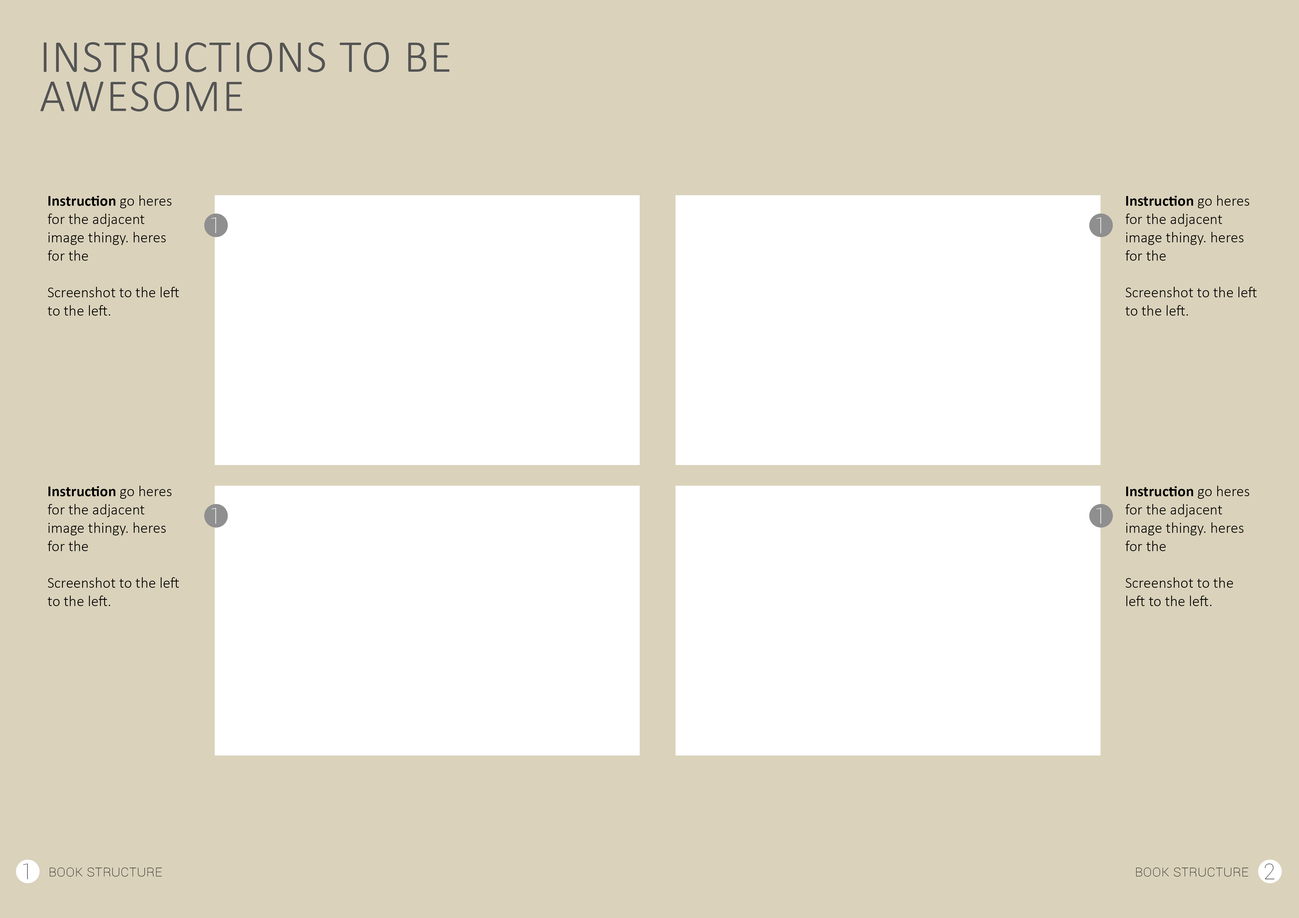
<style>
.page{position:relative;width:1299px;height:918px;background:#dad2bb}
.page>*{position:absolute;margin:0}
.t1{font:45.8px "Calibri-Light";letter-spacing:0.025em;color:#545454;text-transform:uppercase}
.t2{font:15.3px "Calibri-Light";color:#000000}
.t3{font:15.3px "Calibri-Bold";color:#000000}
.t4{font:21.8px "Roboto-Thin";color:#ffffff}
.t5{font:21.8px "Roboto-Thin";color:#484848}
.t6{font:15.3px "Roboto-Thin";color:#000000;font-variant:small-caps}
</style>
<div class="page">
<p class="t1" style="left:40px;top:42px;width:409px;height:70px">instructions to be awesome</p>
<p class="t2" style="left:48px;top:195px;width:131px;height:121px"><span class="t3">Instruction </span>go heres for the adjacent image thingy. heres for the <br><br>Screenshot to the left to the left.</p>
<p class="t2" style="left:1125px;top:195px;width:131px;height:121px"><span class="t3">Instruction </span>go heres for the adjacent image thingy. heres for the <br><br>Screenshot to the left to the left.</p>
<p class="t4" style="left:211px;top:218px;width:5px;height:15px">1</p>
<p class="t4" style="left:1096px;top:218px;width:5px;height:15px">1</p>
<p class="t2" style="left:48px;top:486px;width:131px;height:120px"><span class="t3">Instruction </span>go heres for the adjacent image thingy. heres for the <br><br>Screenshot to the left to the left.</p>
<p class="t2" style="left:1125px;top:486px;width:124px;height:120px"><span class="t3">Instruction </span>go heres for the adjacent image thingy. heres for the <br><br>Screenshot to the left to the left.</p>
<p class="t4" style="left:211px;top:508px;width:5px;height:16px">1</p>
<p class="t4" style="left:1096px;top:508px;width:5px;height:16px">1</p>
<p class="t5" style="left:23px;top:864px;width:5px;height:16px">1</p>
<p class="t6" style="left:50px;top:868px;width:112px;height:9px">Book structure</p>
<p class="t6" style="left:1136px;top:868px;width:112px;height:9px">Book structure</p>
<p class="t5" style="left:1264px;top:864px;width:10px;height:16px">2</p>
</div>
